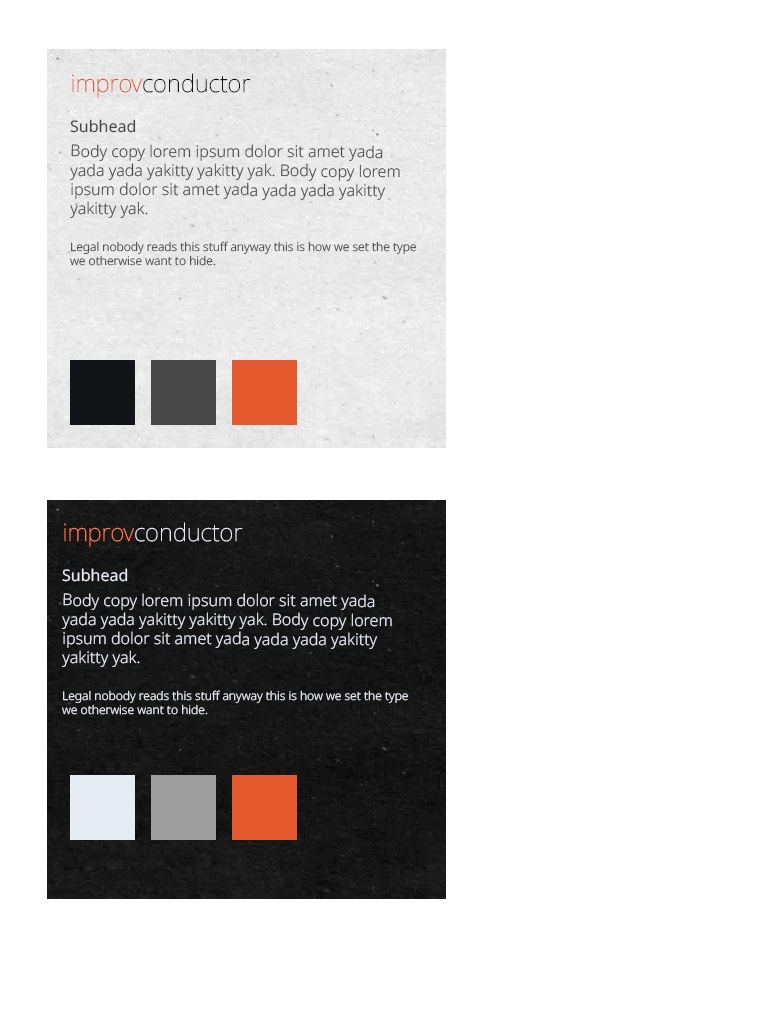
<style>
.page{position:relative;width:768px;height:1024px;background:#ffffff}
.page>*{position:absolute;margin:0}
.t1{font:24px "NotoSans-Thin";color:#121418}
.t2{font:24px "NotoSans-Thin";color:#e5592e}
.t3{font:16px "NotoSans-Regular";color:#474747}
.t4{font:16px "NotoSans-Light";color:#474747}
.t5{font:12px "NotoSans-Light";color:#474747}
.t6{font:24px "NotoSans-Thin";color:#e7ebf3}
.t7{font:24px "NotoSans-Thin";color:#ff774d}
.t8{font:16px "NotoSans-Regular";color:#e7ebf3}
.t9{font:16px "NotoSans-Light";color:#e7ebf3}
.t10{font:12px "NotoSans-Light";color:#e7ebf3}
</style>
<div class="page">
<p class="t1" style="left:72px;top:73px;width:179px;height:25px"><span class="t2">improv</span>conductor</p>
<p class="t3" style="left:70px;top:119px;width:66px;height:14px">Subhead</p>
<p class="t4" style="left:70px;top:144px;width:330px;height:74px">Body copy lorem ipsum dolor sit amet yada yada yada yakitty yakitty yak. Body copy lorem ipsum dolor sit amet yada yada yada yakitty yakitty yak.</p>
<p class="t5" style="left:70px;top:241px;width:346px;height:25px">Legal nobody reads this stuff anyway this is how we set the type we otherwise want to hide.</p>
<p class="t6" style="left:64px;top:522px;width:179px;height:25px"><span class="t7">improv</span>conductor</p>
<p class="t8" style="left:62px;top:568px;width:66px;height:14px">Subhead</p>
<p class="t9" style="left:62px;top:593px;width:330px;height:74px">Body copy lorem ipsum dolor sit amet yada yada yada yakitty yakitty yak. Body copy lorem ipsum dolor sit amet yada yada yada yakitty yakitty yak.</p>
<p class="t10" style="left:62px;top:690px;width:346px;height:25px">Legal nobody reads this stuff anyway this is how we set the type we otherwise want to hide.</p>
</div>
